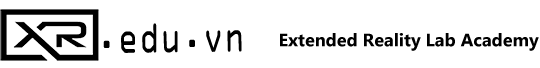
<style>
.page{position:relative;width:540px;height:68px;background:#ffffff}
.page>*{position:absolute;margin:0}
.t1{font:39.6px "OCRAStd";color:#000000;scale:0.75 1}
.t2{font:18px "Gadugi-Bold";color:#000000}
</style>
<div class="page">
<p class="t1" style="left:103px;top:23px;width:139px;height:30px;rotate:-1deg">.edu.vn</p>
<p class="t2" style="left:280px;top:33px;width:259px;height:18px">Extended Reality Lab Academy</p>
</div>
